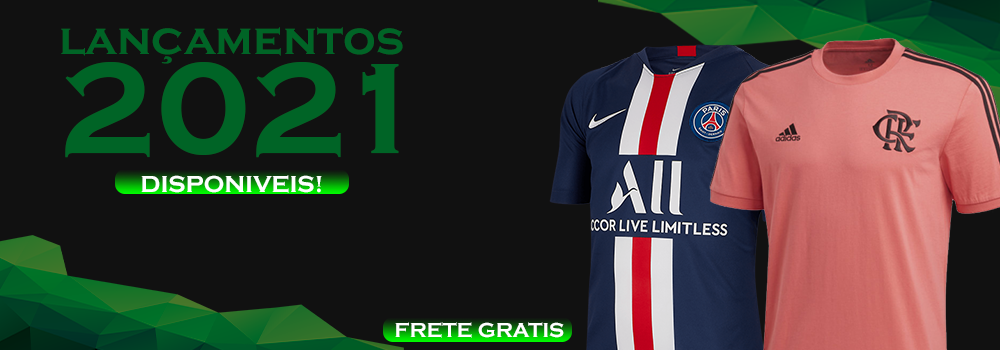
<style>
.page{position:relative;width:1000px;height:350px;background:#111111}
.page>*{position:absolute;margin:0}
.t1{font:46px "CopperplateGothic-Bold";color:#006426}
.t2{font:133.5px "CopperplateGothic-Bold";color:#006426}
.t3{font:23.9px "CopperplateGothic-Bold";color:#fcfffd}
.t4{font:20.9px "CopperplateGothic-Bold";color:#ffffff}
</style>
<div class="page">
<p class="t1" style="left:61px;top:27px;width:342px;height:37px">lançamentos</p>
<p class="t2" style="left:65px;top:62px;width:334px;height:96px">2021</p>
<p class="t3" style="left:141px;top:175px;width:181px;height:18px">DISPONIVEIS!</p>
<p class="t4" style="left:395px;top:322px;width:169px;height:16px">FRETE GRATIS</p>
</div>
